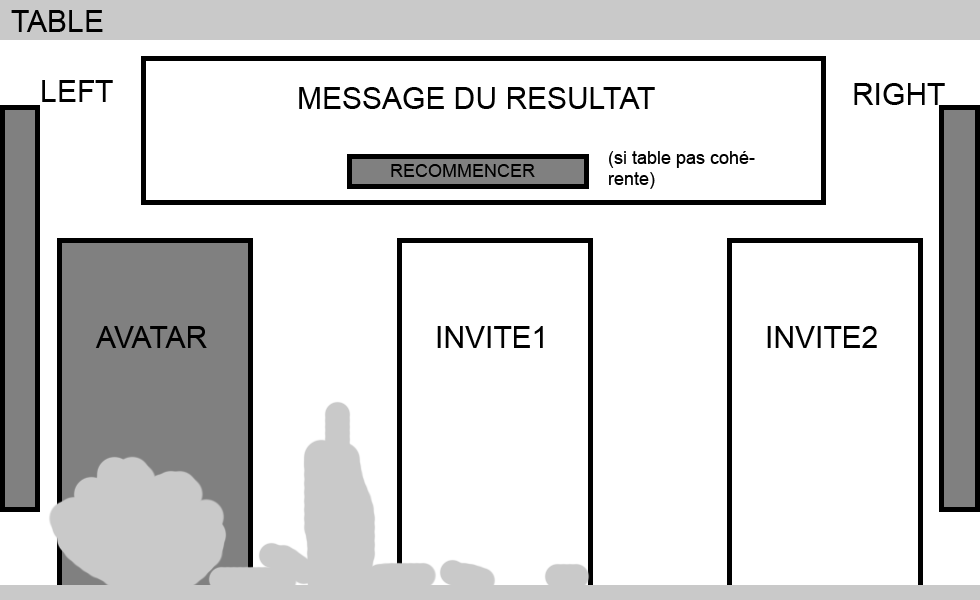
<style>
.page{position:relative;width:980px;height:600px;background:#ffffff}
.page>*{position:absolute;margin:0}
.t1{font:30px "ArialMT";color:#000000}
.t2{font:18px "ArialMT";color:#000000}
</style>
<div class="page">
<p class="t1" style="left:11px;top:10px;width:92px;height:22px">TABLE</p>
<p class="t1" style="left:42px;top:80px;width:71px;height:22px">LEFT</p>
<p class="t1" style="left:299px;top:87px;width:356px;height:22px">MESSAGE DU RESULTAT</p>
<p class="t1" style="left:854px;top:83px;width:91px;height:22px">RIGHT</p>
<p class="t2" style="left:609px;top:151px;width:146px;height:38px">(si table pas cohérente)</p>
<p class="t2" style="left:391px;top:164px;width:144px;height:13px">RECOMMENCER</p>
<p class="t1" style="left:95px;top:326px;width:112px;height:22px">AVATAR</p>
<p class="t1" style="left:437px;top:326px;width:106px;height:22px">INVITE1</p>
<p class="t1" style="left:767px;top:326px;width:110px;height:22px">INVITE2</p>
</div>
